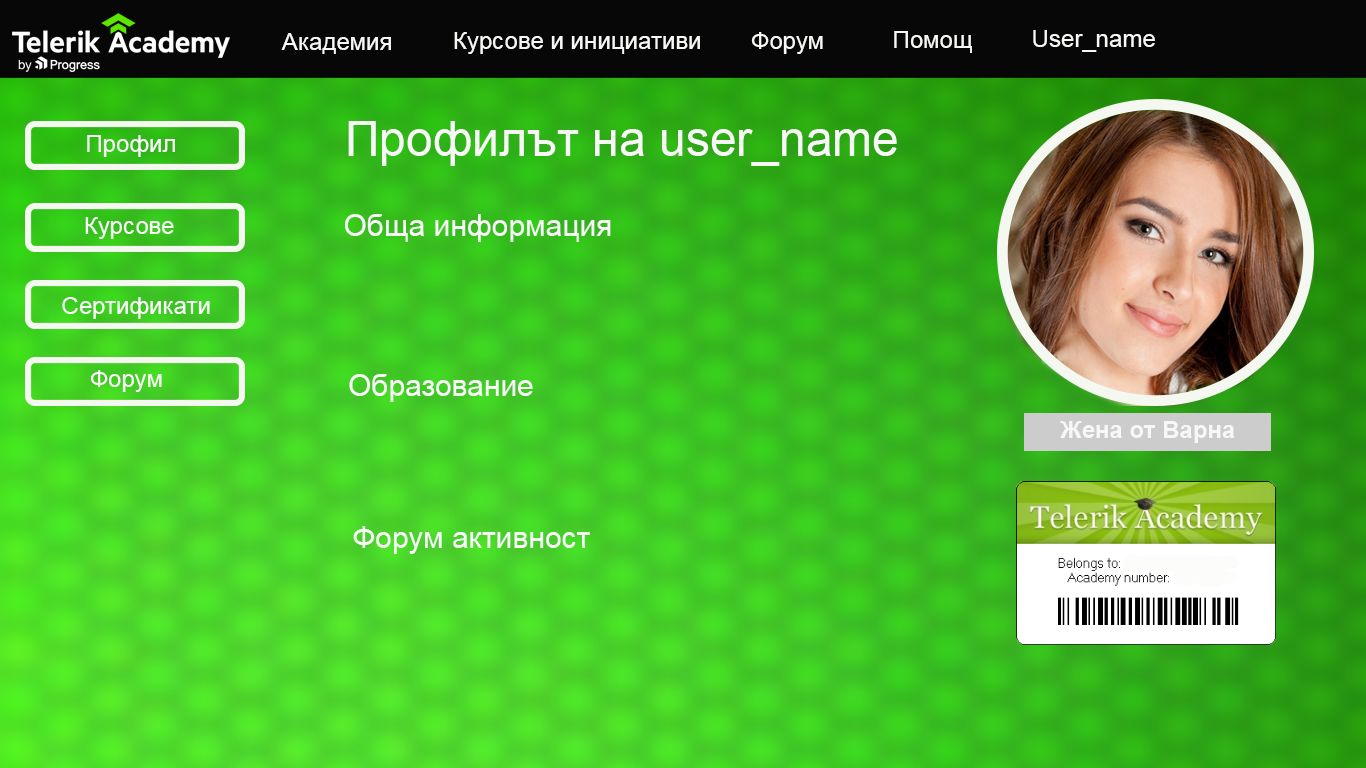
<style>
.page{position:relative;width:1366px;height:768px}
.page>*{position:absolute;margin:0}
.t1{font:24px "ArialMT";color:#f7f8f5}
.t2{font:23.7px "ArialMT";color:#f7f8f5}
.t3{font:48px "ArialMT";color:#f7f8f5}
.t4{font:30px "ArialMT";color:#f7f8f5}
.t5{font:24px "Arial-BoldMT";color:#f7f8f5}
</style>
<div class="page">
<p class="t1" style="left:1033px;top:30px;width:122px;height:22px">User_name</p>
<p class="t1" style="left:281px;top:33px;width:110px;height:21px">Академия</p>
<p class="t2" style="left:454px;top:32px;width:246px;height:22px">Курсове и инициативи</p>
<p class="t2" style="left:751px;top:32px;width:72px;height:22px">Форум</p>
<p class="t2" style="left:894px;top:31px;width:78px;height:22px">Помощ</p>
<p class="t3" style="left:348px;top:121px;width:549px;height:45px">Профилът на user_name</p>
<p class="t1" style="left:87px;top:135px;width:88px;height:22px">Профил</p>
<p class="t1" style="left:85px;top:217px;width:89px;height:22px">Курсове</p>
<p class="t4" style="left:345px;top:214px;width:266px;height:28px">Обща информация</p>
<p class="t1" style="left:62px;top:297px;width:148px;height:22px">Сертификати</p>
<p class="t1" style="left:90px;top:370px;width:72px;height:22px">Форум</p>
<p class="t4" style="left:349px;top:374px;width:184px;height:28px">Образование</p>
<p class="t5" style="left:1060px;top:421px;width:175px;height:22px">Жена от Варна</p>
<p class="t4" style="left:353px;top:526px;width:237px;height:28px">Форум активност</p>
</div>
